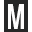
<style>
.page{position:relative;width:32px;height:32px;background:#262727}
.page>*{position:absolute;margin:0}
.t1{font:35.3px "Tungsten-Medium";color:#fefefe;scale:1.04 1}
</style>
<div class="page">
<p class="t1" style="left:8px;top:4px;width:16px;height:25px">M</p>
</div>
